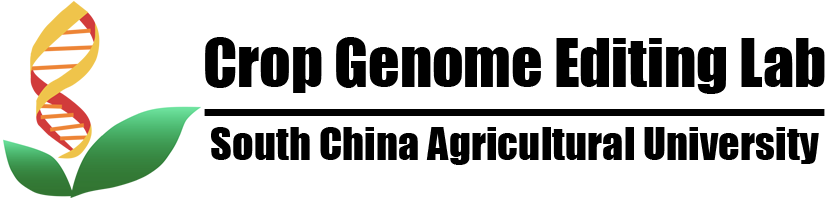
<style>
.page{position:relative;width:830px;height:200px;background:#ffffff}
.page>*{position:absolute;margin:0}
.t1{font:42.4px/44.8px "Impact";color:#000000}
.t2{font:61.8px/44.8px "Impact";color:#000000}
</style>
<div class="page">
<p class="t1" style="left:204px;top:37px;width:621px;height:128px;text-align:center"><span class="t2">Crop Genome Editing Lab<br>——————————<br></span>South China Agricultural University</p>
</div>
